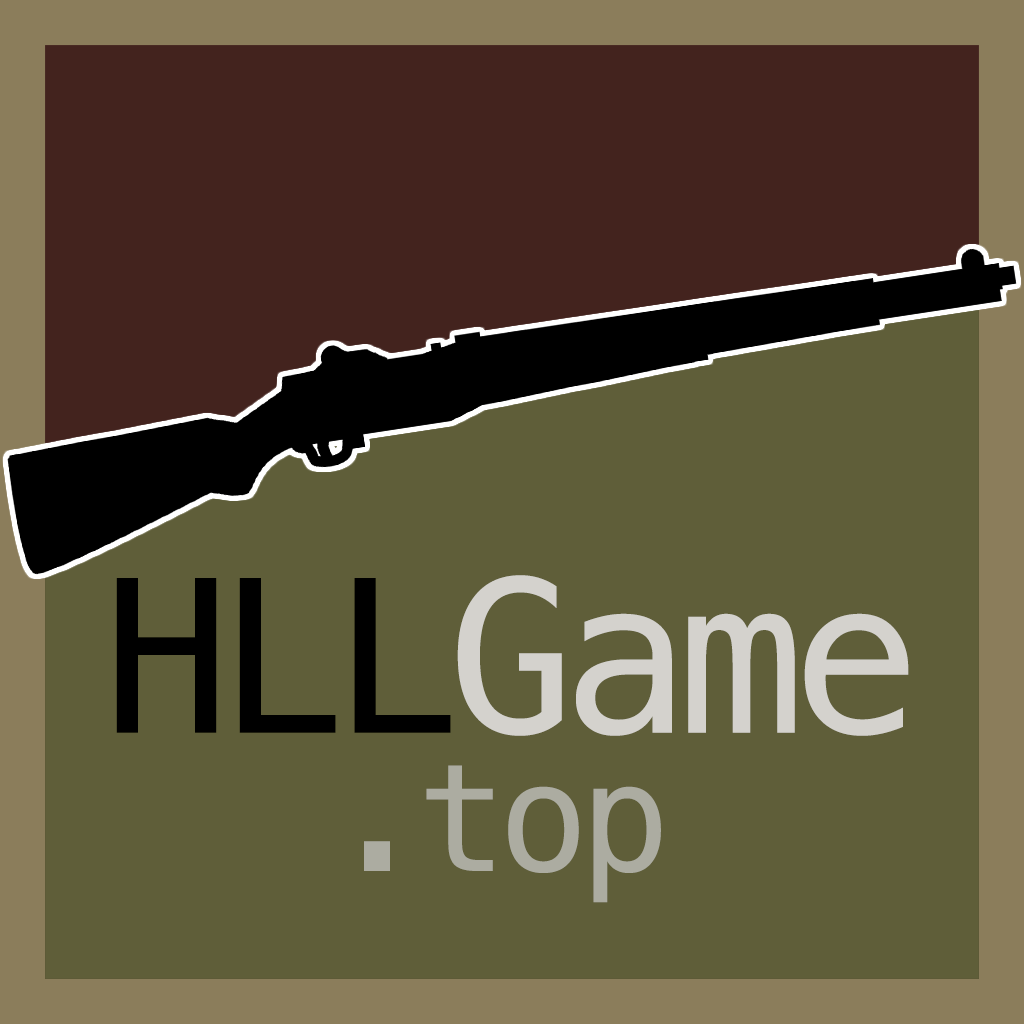
<style>
.page{position:relative;width:1024px;height:1024px;background:#5f5e39}
.page>*{position:absolute;margin:0}
.t1{font:212px "MesloLGSNFP-Regular";letter-spacing:-0.06em;color:#d4d2cd}
.t2{font:212px "MesloLGSNFP-Regular";letter-spacing:-0.06em;color:#000000}
.t3{font:150px "MesloLGSNFP-Regular";letter-spacing:-0.06em;color:#acaca1}
</style>
<div class="page">
<p class="t1" style="left:116px;top:575px;width:793px;height:161px"><span class="t2">HLL</span>Game</p>
<p class="t3" style="left:364px;top:765px;width:297px;height:138px">.top</p>
</div>
